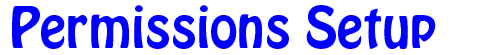
<style>
.page{position:relative;width:500px;height:55px;background:#ffffff}
.page>*{position:absolute;margin:0}
.t1{font:50px "HoboStd";color:#0000ff}
</style>
<div class="page">
<p class="t1" style="left:12px;top:5px;width:424px;height:44px">Permissions Setup</p>
</div>
